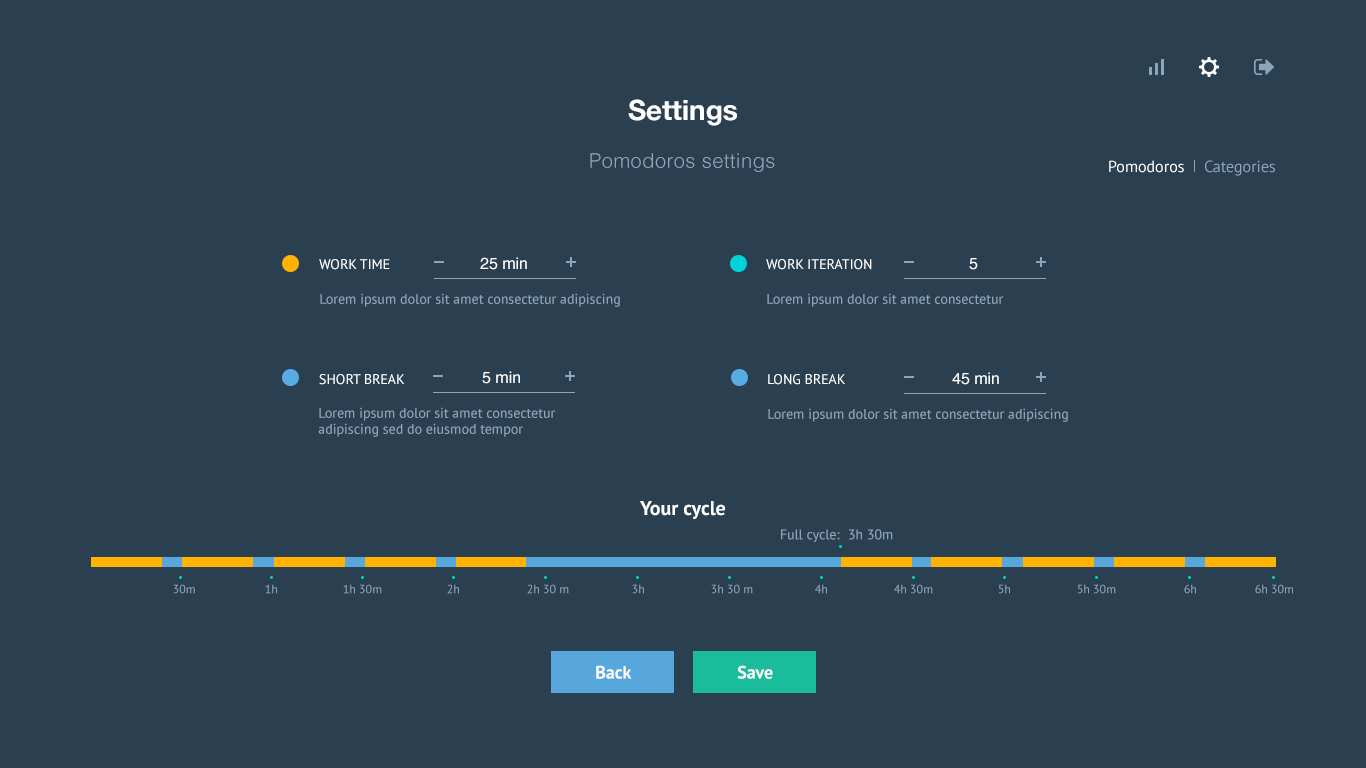
<style>
.page{position:relative;width:1366px;height:768px;background:#2a3f50}
.page>*{position:absolute;margin:0}
.t1{font:28px "HelveticaNeue-Bold";color:#ffffff}
.t2{font:20px "Helvetica-Light";letter-spacing:0.025em;color:#8da5b8}
.t3{font:16px "PTSans-Regular";color:#ffffff}
.t4{font:16px "PTSans-Regular";color:#8da5b8}
.t5{font:16px "Helvetica";color:#ffffff}
.t6{font:14px "PTSans-Regular";color:#ffffff;text-transform:uppercase}
.t7{font:14px "PTSans-Regular";color:#8da5b8}
.t8{font:14px/16px "PTSans-Regular";color:#8da5b8}
.t9{font:20px "PTSans-Bold";color:#ffffff}
.t10{font:12px "PTSans-Regular";color:#8da5b8}
.t11{font:18px "PTSans-Bold";color:#ffffff}
</style>
<div class="page">
<p class="t1" style="left:628px;top:99px;width:109px;height:27px">Settings</p>
<p class="t2" style="left:590px;top:153px;width:185px;height:19px">Pomodoros settings</p>
<p class="t3" style="left:1109px;top:160px;width:75px;height:13px">Pomodoros</p>
<p class="t4" style="left:1205px;top:160px;width:70px;height:16px">Categories</p>
<p class="t5" style="left:480px;top:257px;width:47px;height:13px">25 min</p>
<p class="t6" style="left:319px;top:259px;width:71px;height:11px">Work Time</p>
<p class="t6" style="left:766px;top:259px;width:106px;height:11px">Work Iteration</p>
<p class="t5" style="left:969px;top:258px;width:9px;height:12px">5</p>
<p class="t7" style="left:320px;top:293px;width:300px;height:14px">Lorem ipsum dolor sit amet consectetur adipiscing</p>
<p class="t7" style="left:767px;top:293px;width:237px;height:14px">Lorem ipsum dolor sit amet consectetur</p>
<p class="t6" style="left:319px;top:374px;width:86px;height:11px">Short Break</p>
<p class="t5" style="left:482px;top:371px;width:38px;height:13px">5 min</p>
<p class="t6" style="left:768px;top:374px;width:77px;height:11px">Long Break</p>
<p class="t5" style="left:952px;top:372px;width:47px;height:13px">45 min</p>
<p class="t8" style="left:318px;top:407px;width:238px;height:30px">Lorem ipsum dolor sit amet consectetur adipiscing sed do eiusmod tempor</p>
<p class="t7" style="left:768px;top:408px;width:300px;height:14px">Lorem ipsum dolor sit amet consectetur adipiscing</p>
<p class="t9" style="left:640px;top:501px;width:85px;height:18px">Your cycle</p>
<p class="t7" style="left:781px;top:529px;width:59px;height:13px">Full cycle:</p>
<p class="t7" style="left:849px;top:529px;width:44px;height:11px">3h 30m</p>
<p class="t10" style="left:173px;top:584px;width:22px;height:10px">30m</p>
<p class="t10" style="left:265px;top:584px;width:12px;height:10px">1h</p>
<p class="t10" style="left:343px;top:584px;width:39px;height:10px">1h 30m</p>
<p class="t10" style="left:447px;top:584px;width:12px;height:10px">2h</p>
<p class="t10" style="left:527px;top:584px;width:42px;height:10px">2h 30 m</p>
<p class="t10" style="left:632px;top:584px;width:12px;height:10px">3h</p>
<p class="t10" style="left:711px;top:584px;width:42px;height:10px">3h 30 m</p>
<p class="t10" style="left:815px;top:584px;width:12px;height:10px">4h</p>
<p class="t10" style="left:894px;top:584px;width:39px;height:10px">4h 30m</p>
<p class="t10" style="left:998px;top:584px;width:12px;height:10px">5h</p>
<p class="t10" style="left:1077px;top:584px;width:39px;height:10px">5h 30m</p>
<p class="t10" style="left:1184px;top:584px;width:12px;height:10px">6h</p>
<p class="t10" style="left:1255px;top:584px;width:38px;height:10px">6h 30m</p>
<p class="t11" style="left:596px;top:665px;width:36px;height:14px">Back</p>
<p class="t11" style="left:737px;top:665px;width:36px;height:14px">Save</p>
</div>
